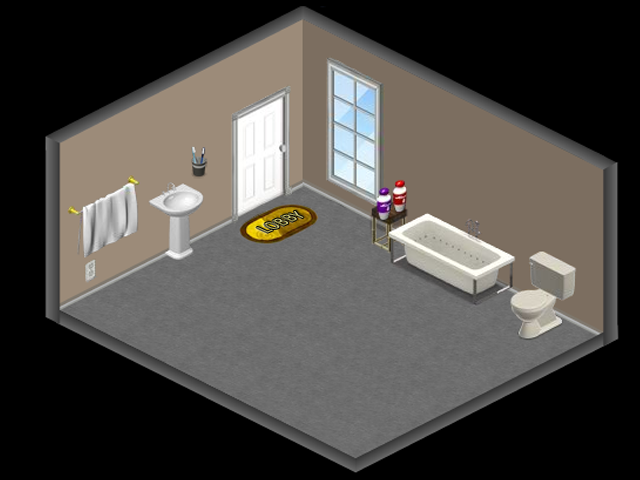
<style>
.page{position:relative;width:640px;height:480px;background:#000000}
.page>*{position:absolute;margin:0}
.t1{font:24.3px "Verdana";font-variant:small-caps;font-weight:bold;scale:0.75 1}
</style>
<div class="page">
<p class="t1" style="left:256px;top:211px;width:48px;height:22px;rotate:-23deg">lobby</p>
</div>
